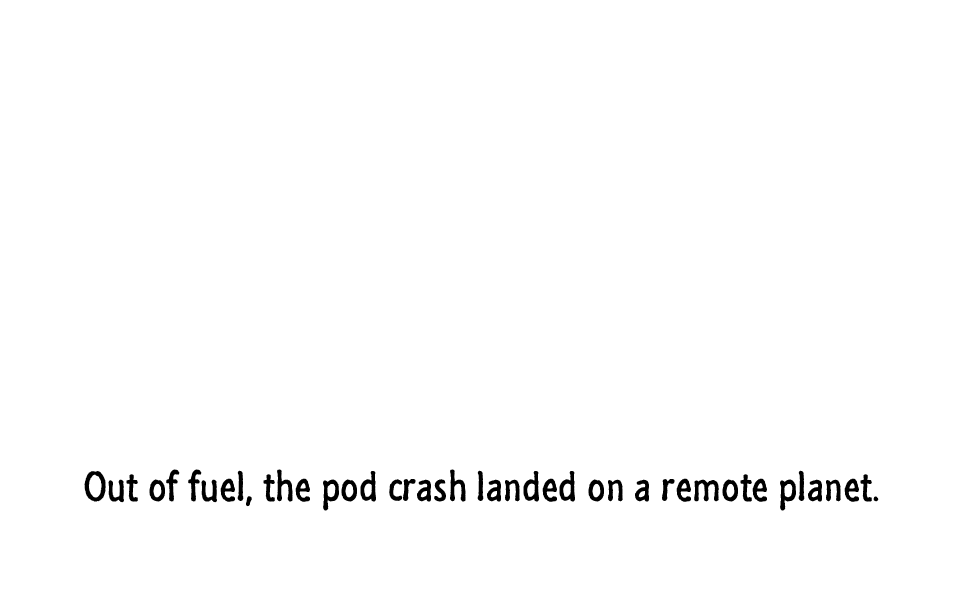
<style>
.page{position:relative;width:960px;height:600px;background:#ffffff}
.page>*{position:absolute;margin:0}
.t1{font:42px "SegoeMarker";color:#000000}
</style>
<div class="page">
<p class="t1" style="left:84px;top:469px;width:795px;height:42px">Out of fuel, the pod crash landed on a remote planet.</p>
</div>
